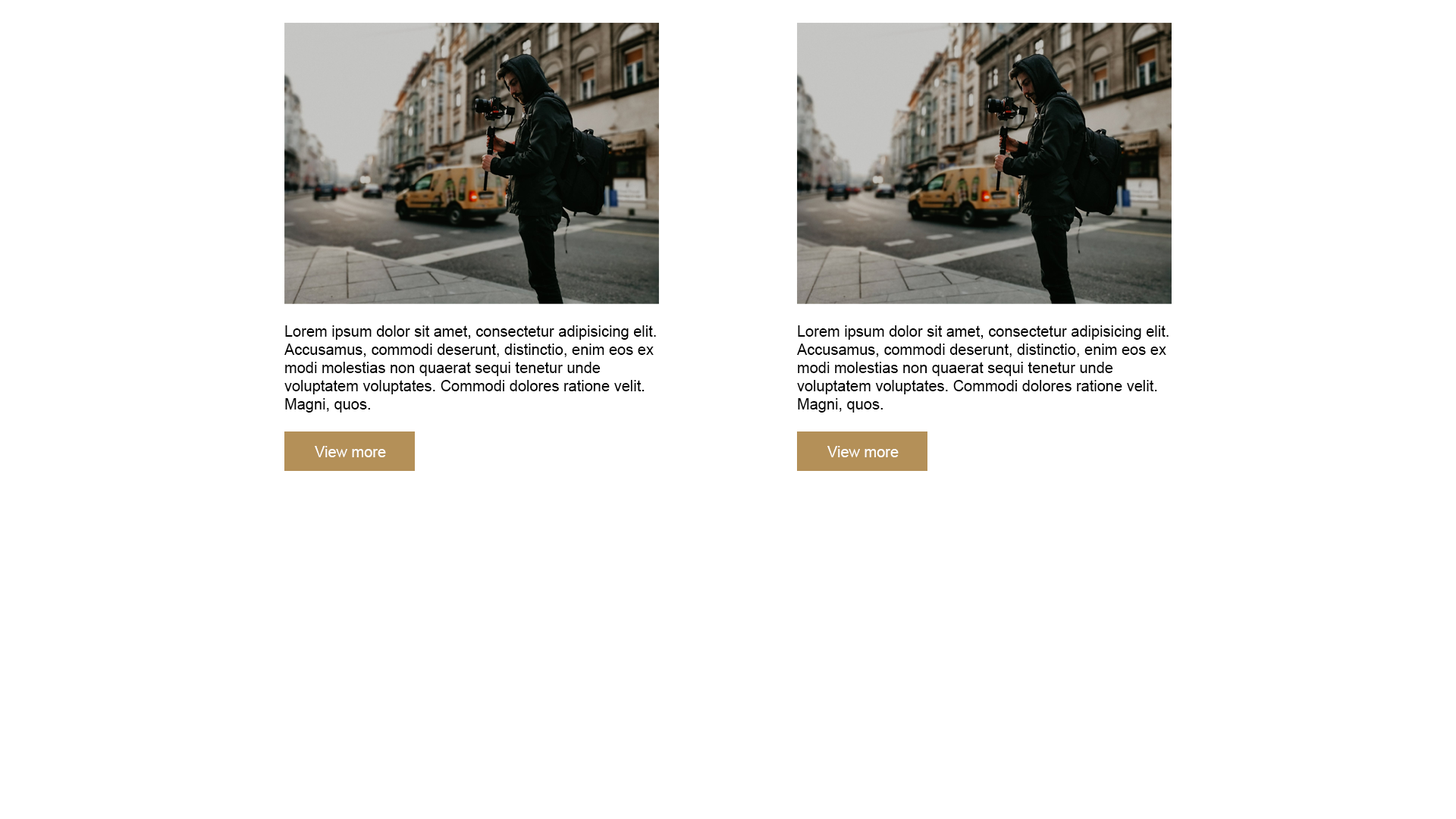
<style>
.page{position:relative;width:1456px;height:819px;background:#ffffff}
.page>*{position:absolute;margin:0}
.t1{font:15.2px "ArialMT";color:#000000}
.t2{font:15.2px "ArialMT";color:#ffffff}
</style>
<div class="page">
<p class="t1" style="left:284px;top:325px;width:372px;height:88px">Lorem ipsum dolor sit amet, consectetur adipisicing elit. Accusamus, commodi deserunt, distinctio, enim eos ex modi molestias non quaerat sequi tenetur unde<br>voluptatem voluptates. Commodi dolores ratione velit. Magni, quos.</p>
<p class="t1" style="left:797px;top:325px;width:372px;height:88px">Lorem ipsum dolor sit amet, consectetur adipisicing elit. Accusamus, commodi deserunt, distinctio, enim eos ex modi molestias non quaerat sequi tenetur unde<br>voluptatem voluptates. Commodi dolores ratione velit. Magni, quos.</p>
<p class="t2" style="left:315px;top:446px;width:71px;height:11px">View more</p>
<p class="t2" style="left:827px;top:446px;width:72px;height:11px">View more</p>
</div>
